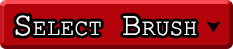
<style>
.page{position:relative;width:233px;height:49px;background:#b2040a}
.page>*{position:absolute;margin:0}
.t1{font:33px "CourierNewPSMT";color:#ffffff;font-variant:small-caps}
</style>
<div class="page">
<p class="t1" style="left:15px;top:15px;width:182px;height:21px">Select Brush</p>
</div>
